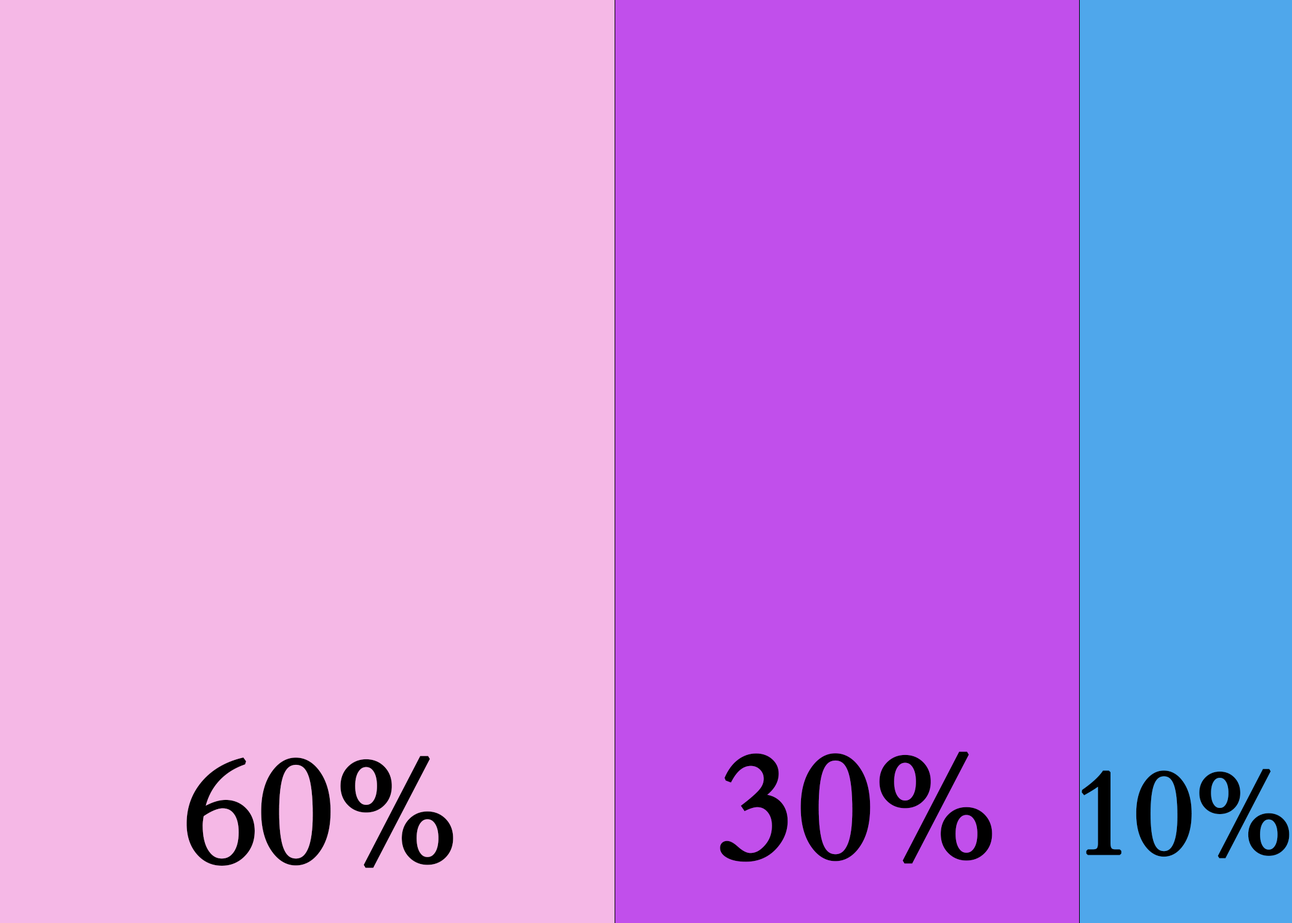
<style>
.page{position:relative;width:1292px;height:923px;background:#f5b8e6}
.page>*{position:absolute;margin:0}
.t1{font:256.4px "Aldine401BT-RomanA";color:#000000;font-weight:bold}
.t2{font:205.1px "Aldine401BT-RomanA";color:#000000;font-weight:bold}
</style>
<div class="page">
<p class="t1" style="left:186px;top:756px;width:267px;height:112px">60%</p>
<p class="t1" style="left:720px;top:751px;width:272px;height:113px">30%</p>
<p class="t2" style="left:1082px;top:768px;width:208px;height:90px">10%</p>
</div>
